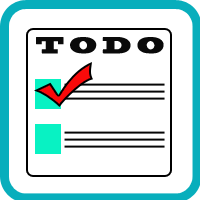
<style>
.page{position:relative;width:200px;height:200px;background:#ffffff}
.page>*{position:absolute;margin:0}
.t1{font:21.4px "BlackoakStd";letter-spacing:0.38em;color:#0a0a0a;text-transform:uppercase;scale:0.71 1}
</style>
<div class="page">
<p class="t1" style="left:36px;top:37px;width:128px;height:17px">todo</p>
</div>
